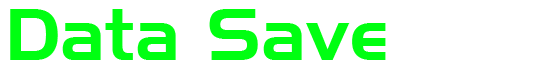
<style>
.page{position:relative;width:540px;height:84px;background:#ffffff}
.page>*{position:absolute;margin:0}
.t1{font:71.1px "HandelGothicBT-Regular";color:#00ff11}
</style>
<div class="page">
<p class="t1" style="left:10px;top:9px;width:376px;height:51px">Data Save</p>
</div>
